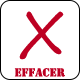
<style>
.page{position:relative;width:80px;height:80px;background:#ffffff}
.page>*{position:absolute;margin:0}
.t1{font:60px "SegoePrint";color:#bd0022}
.t2{font:12px "Stencil";color:#bd0022}
</style>
<div class="page">
<p class="t1" style="left:19px;top:11px;width:45px;height:49px">X</p>
<p class="t2" style="left:14px;top:68px;width:51px;height:9px">EFFACER</p>
</div>
